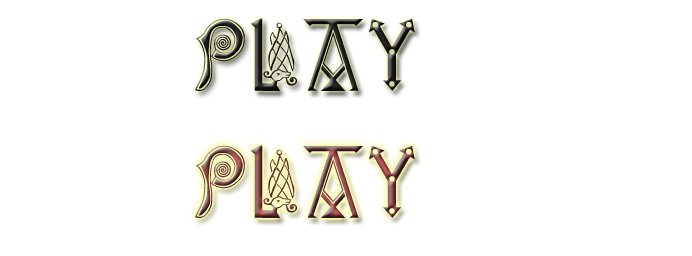
<style>
.page{position:relative;width:692px;height:256px;background:#ffffff}
.page>*{position:absolute;margin:0}
.t1{font:72px "Anglo-Saxon,-8th-c."}
</style>
<div class="page">
<p class="t1" style="left:195px;top:18px;width:220px;height:73px">Play</p>
<p class="t1" style="left:195px;top:145px;width:220px;height:73px">Play</p>
</div>
